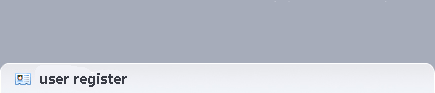
<style>
.page{position:relative;width:435px;height:93px;background:#a6acba}
.page>*{position:absolute;margin:0}
.t1{font:14px "MicrosoftYaHei-Bold";color:#3a3d47}
</style>
<div class="page">
<p class="t1" style="left:40px;top:73px;width:87px;height:14px">user register</p>
</div>
